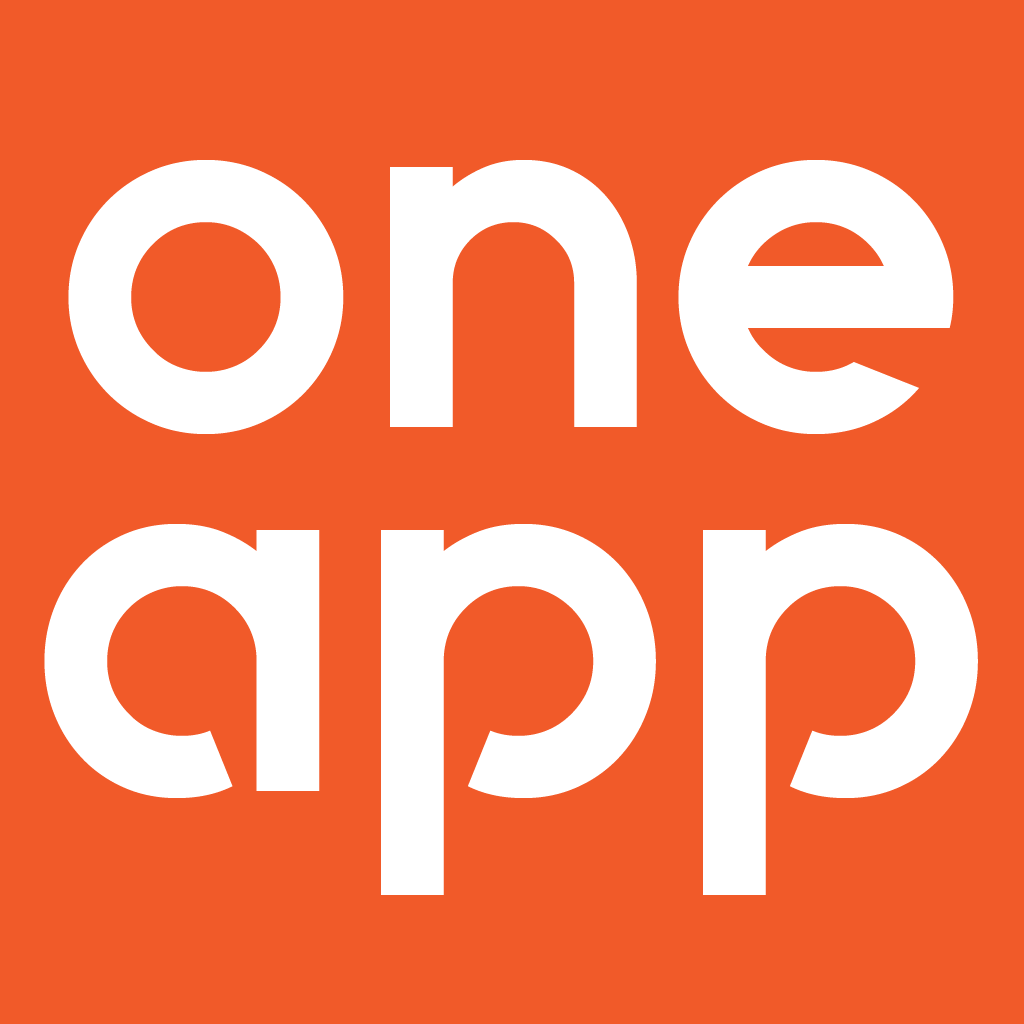
<style>
.page{position:relative;width:1024px;height:1024px;background:#f15a29}
.page>*{position:absolute;margin:0}
.t1{font:520.4px "Quantify-Bold";color:#ffffff}
</style>
<div class="page">
<p class="t1" style="left:68px;top:160px;width:886px;height:274px">one</p>
<p class="t1" style="left:44px;top:524px;width:934px;height:371px">app</p>
</div>
